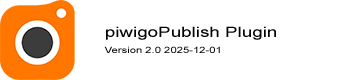
<style>
.page{position:relative;width:338px;height:80px;background:#ffffff}
.page>*{position:absolute;margin:0}
.t1{font:14.1px "ArialMT";color:#050505;scale:1.33 1}
.t2{font:8.5px "ArialMT";color:#050505;scale:1.33 1}
</style>
<div class="page">
<p class="t1" style="left:106px;top:26px;width:170px;height:14px">piwigoPublish Plugin</p>
<p class="t2" style="left:104px;top:46px;width:116px;height:7px">Version 2.0 2025-12-01</p>
</div>
